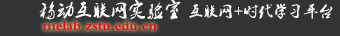
<style>
.page{position:relative;width:340px;height:36px;background:#333333}
.page>*{position:absolute;margin:0}
.t1{font:15px "2.0-";color:#fcfcf8}
.t2{font:18px "2.0-";color:#fcfcf8}
.t3{font:14px "2.0-";color:#ff0000}
</style>
<div class="page">
<p class="t1" style="left:39px;top:0px;width:294px;height:20px"><span class="t2">移动互联网实验室 </span>互联网+时代学习平台</p>
<p class="t3" style="left:43px;top:20px;width:114px;height:10px">melab.zstu.edu.cn</p>
</div>
